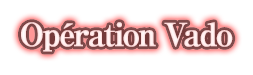
<style>
.page{position:relative;width:253px;height:75px;background:#ffffff}
.page>*{position:absolute;margin:0}
.t1{font:32px "RyuminPro-ExBold";letter-spacing:-0.08em;color:#ffeaea;font-weight:bold}
</style>
<div class="page">
<p class="t1" style="left:21px;top:22px;width:212px;height:30px">Opération Vado</p>
</div>
